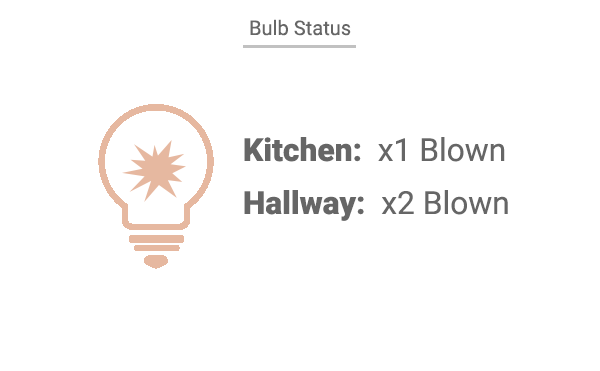
<style>
.page{position:relative;width:600px;height:371px;background:#ffffff}
.page>*{position:absolute;margin:0}
.t1{font:20.1px "Roboto-Regular";color:#666666}
.t2{font:31.8px "Roboto-Black";color:#666666}
.t3{font:31.8px "Roboto-Regular";color:#666666}
</style>
<div class="page">
<p class="t1" style="left:250px;top:19px;width:101px;height:17px">Bulb Status</p>
<p class="t2" style="left:244px;top:137px;width:261px;height:25px">Kitchen:<span class="t3">  x1 Blown</span></p>
<p class="t2" style="left:244px;top:190px;width:264px;height:31px">Hallway:  <span class="t3">x2 Blown</span></p>
</div>
